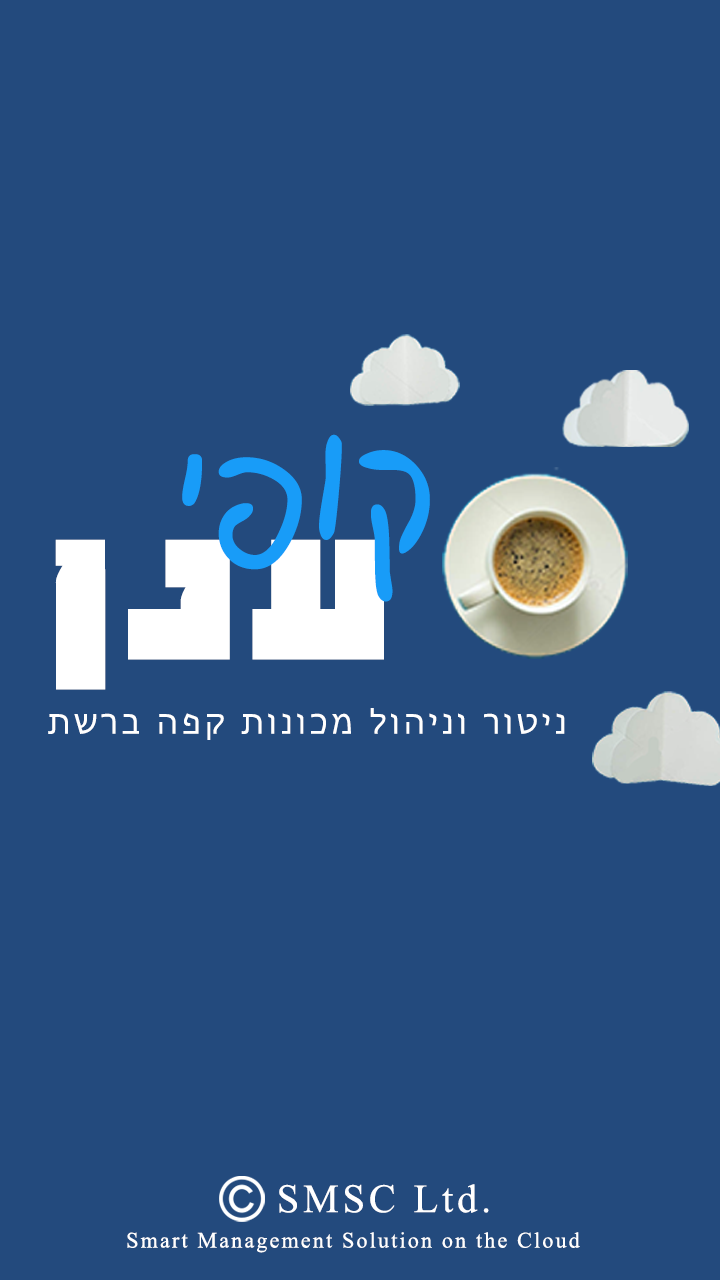
<style>
.page{position:relative;width:720px;height:1280px;background:#234a7d}
.page>*{position:absolute;margin:0}
.t1{font:187.3px "Cafe";letter-spacing:0.05em;color:#189cf8}
.t2{font:187.3px "MigdalHaemeq";letter-spacing:0.1em;color:#ffffff}
.t3{font:34.7px "Gisha";letter-spacing:0.1em;color:#ffffff}
.t4{font:40px "TimesNewRomanPSMT";letter-spacing:0.1em;color:#ffffff}
.t5{font:22px "TimesNewRomanPSMT";letter-spacing:0.1em;color:#ffffff}
</style>
<div class="page">
<p class="t1" style="left:182px;top:434px;width:248px;height:168px">יפוק</p>
<p class="t2" style="left:55px;top:539px;width:329px;height:151px">ןנע</p>
<p class="t3" style="left:48px;top:708px;width:517px;height:32px">תשרב הפק תונוכמ לוהינו רוטינ</p>
<p class="t4" style="left:279px;top:1184px;width:210px;height:29px">SMSC Ltd.</p>
<p class="t5" style="left:127px;top:1232px;width:453px;height:21px">Smart Management Solution on the Cloud</p>
</div>
